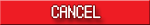
<style>
.page{position:relative;width:150px;height:25px;background:#ee1c24}
.page>*{position:absolute;margin:0}
.t1{font:18px "Power-Clear";color:#ffffff}
</style>
<div class="page">
<p class="t1" style="left:51px;top:5px;width:50px;height:14px">CANCEL</p>
</div>
